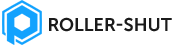
<style>
.page{position:relative;width:177px;height:46px;background:#ffffff}
.page>*{position:absolute;margin:0}
.t1{font:18.3px "MuseoSansCyrl-700";color:#1b1b1b;text-transform:uppercase}
</style>
<div class="page">
<p class="t1" style="left:49px;top:17px;width:123px;height:15px">rolleR-shut</p>
</div>
